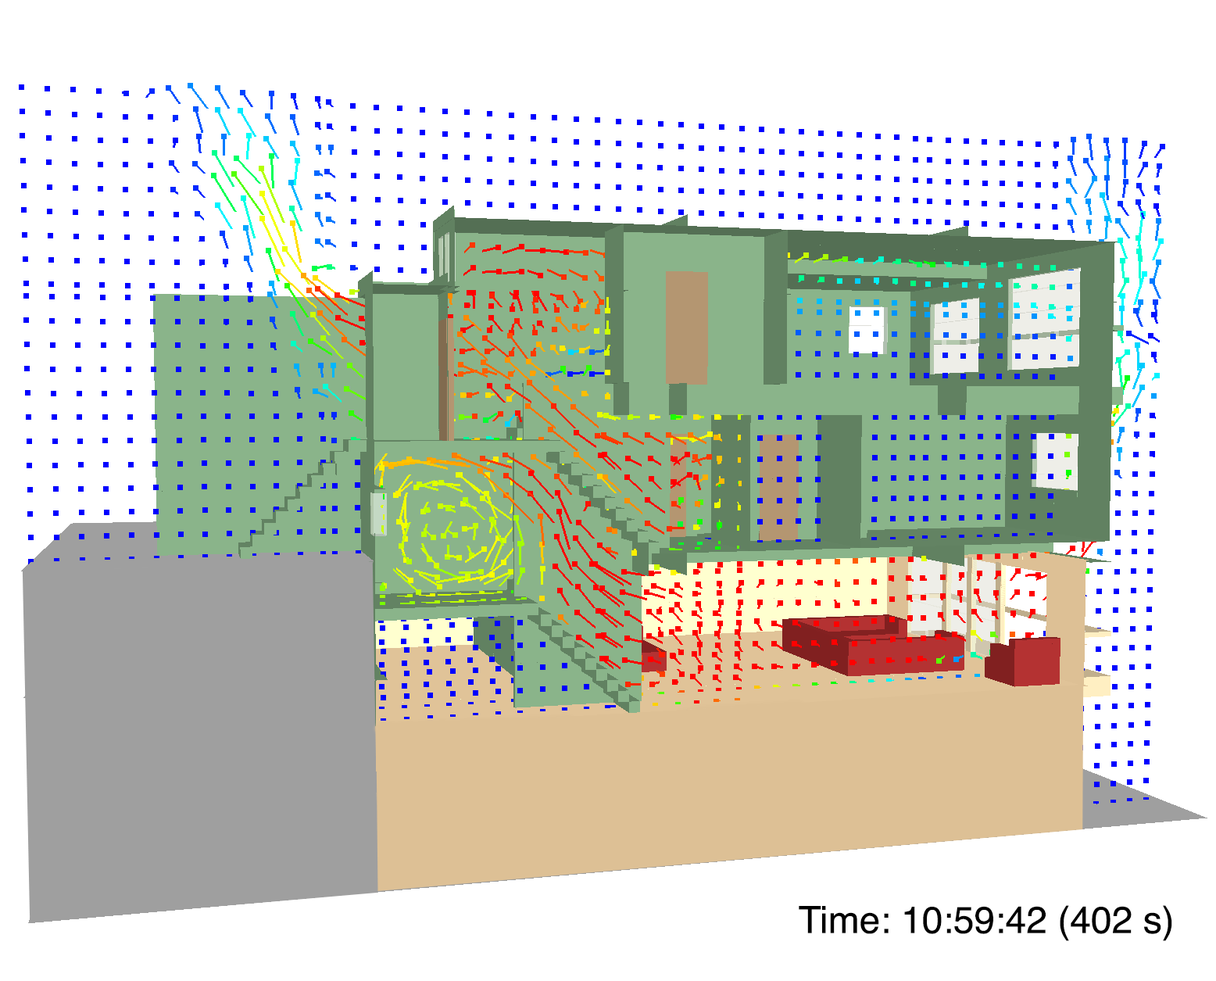
<style>
.page{position:relative;width:1216px;height:981px;background:#ffffff}
.page>*{position:absolute;margin:0}
.t1{font:37.5px "Helvetica";color:#000000}
</style>
<div class="page">
<p class="t1" style="left:799px;top:905px;width:373px;height:36px">Time: 10:59:42 (402 s)</p>
</div>
